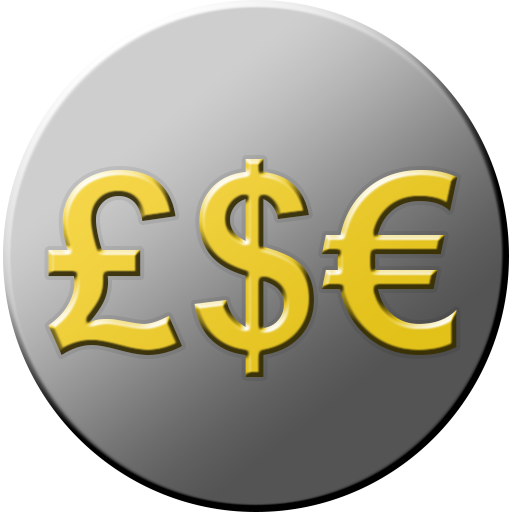
<style>
.page{position:relative;width:512px;height:512px;background:#ffffff}
.page>*{position:absolute;margin:0}
.t1{font:250px "Arial-BoldMT"}
</style>
<div class="page">
<p class="t1" style="left:48px;top:159px;width:410px;height:218px">€$£</p>
</div>
